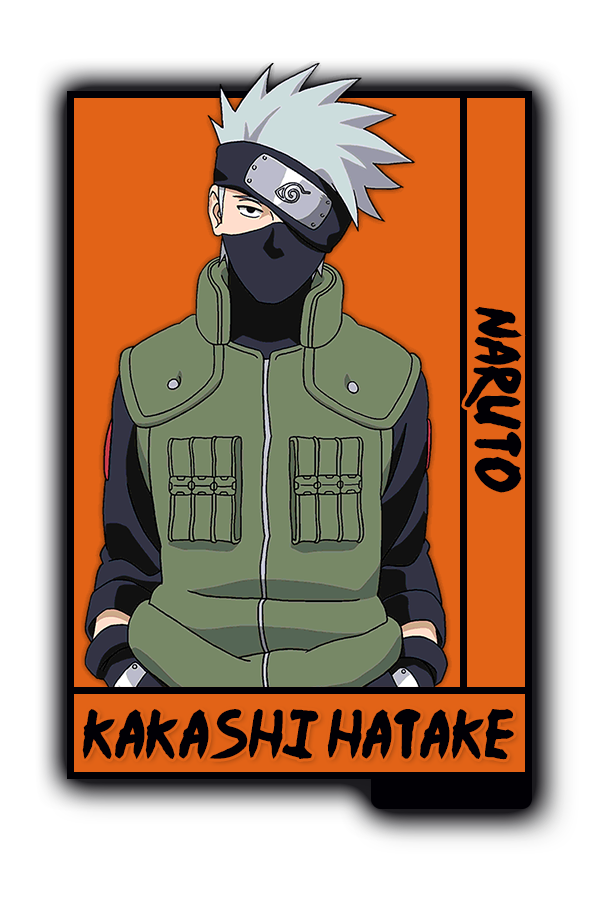
<style>
.page{position:relative;width:600px;height:900px;background:#ffffff}
.page>*{position:absolute;margin:0}
.t1{font:52px "Ninja-Naruto";color:#010005}
.t2{font:55.4px "Ninja-Naruto";color:#010005}
</style>
<div class="page">
<p class="t1" style="left:464px;top:307px;width:59px;height:186px;rotate:90deg">Naruto</p>
<p class="t2" style="left:82px;top:709px;width:432px;height:51px">Kakashi Hatake</p>
</div>
